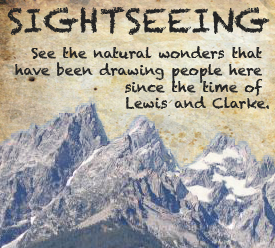
<style>
.page{position:relative;width:275px;height:248px}
.page>*{position:absolute;margin:0}
.t1{font:33px "Chalkduster";color:#252525}
.t2{font:14px "Chalkduster";color:#252525}
</style>
<div class="page">
<p class="t1" style="left:7px;top:7px;width:263px;height:28px">SIGHTSEEING</p>
<p class="t2" style="left:15px;top:46px;width:254px;height:63px;text-align:right">See the natural wonders that <br>have been drawing people here <br>since the time of <br>Lewis and Clarke.</p>
</div>
